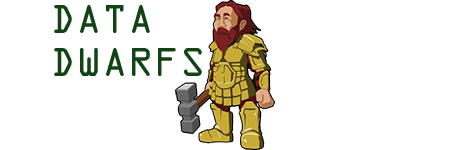
<style>
.page{position:relative;width:450px;height:150px;background:#ffffff}
.page>*{position:absolute;margin:0}
.t1{font:36px "OCRAStd";color:#114314}
</style>
<div class="page">
<p class="t1" style="left:54px;top:5px;width:148px;height:71px">DATA<br>DWARFS</p>
</div>
